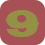
<style>
.page{position:relative;width:45px;height:45px;background:#a75157}
.page>*{position:absolute;margin:0}
.t1{font:50px "Saddlebag-Black";color:#949146}
</style>
<div class="page">
<p class="t1" style="left:5px;top:10px;width:35px;height:27px">9</p>
</div>
